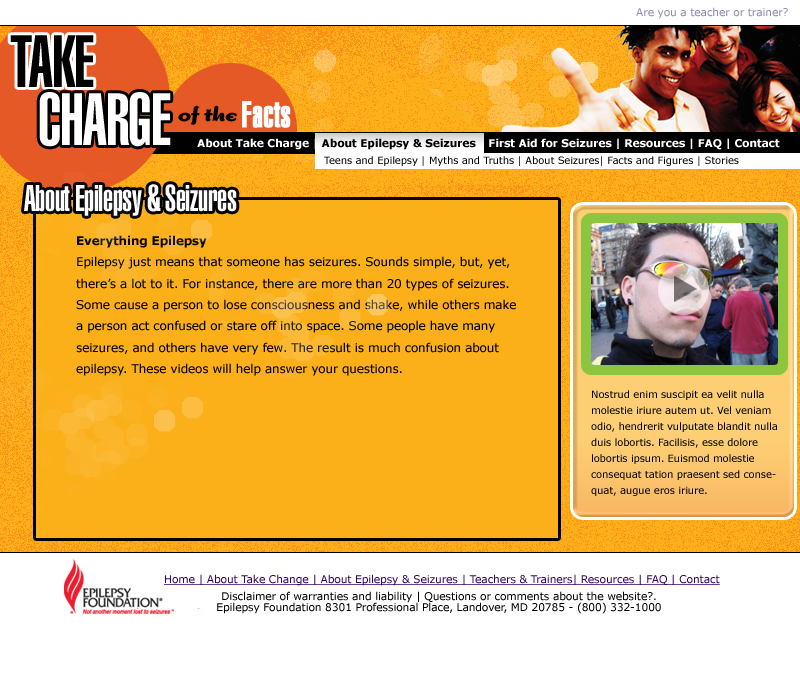
<style>
.page{position:relative;width:800px;height:697px;background:#fbaf18}
.page>*{position:absolute;margin:0}
.t1{font:10.7px "Verdana";letter-spacing:-0.01em;color:#8d89b1}
.t2{font:72px "Swiss911BT-UltraCompressed";letter-spacing:-0.01em;color:#000000}
.t3{font:72px "Swiss911BT-UltraCompressed";letter-spacing:-0.01em;color:#ffffff}
.t4{font:20px "DogmaScriptBold";letter-spacing:-0.05em;color:#030303}
.t5{font:36px "Swiss911BT-UltraCompressed";color:#ffffff;font-weight:bold}
.t6{font:10.7px "Verdana-Bold";letter-spacing:-0.01em;color:#ffffff}
.t7{font:10.7px "Verdana-Bold";letter-spacing:-0.01em;color:#000000}
.t8{font:10px "Verdana";letter-spacing:-0.01em;color:#000000}
.t9{font:36px "Swiss911BT-UltraCompressed";letter-spacing:-0.01em;color:#fefefe}
.t10{font:12px/21.3px "Verdana";letter-spacing:-0.01em;color:#000000}
.t11{font:12px/21.3px "Verdana-Bold";letter-spacing:-0.01em;color:#000000}
.t12{font:10px/16px "Verdana";letter-spacing:-0.01em;color:#000000}
.t13{font:10.7px "Verdana";letter-spacing:-0.01em;color:#330066;text-decoration:underline}
.t14{font:10.7px/10.7px "Verdana";letter-spacing:-0.01em;color:#000000}
</style>
<div class="page">
<p class="t1" style="left:636px;top:7px;width:152px;height:12px">Are you a teacher or trainer?</p>
<p class="t2" style="left:10px;top:35px;width:84px;height:52px">TAKE</p>
<p class="t3" style="left:39px;top:92px;width:132px;height:55px">CHARGE</p>
<p class="t4" style="left:178px;top:101px;width:113px;height:27px">of the <span class="t5">Facts</span></p>
<p class="t6" style="left:197px;top:138px;width:583px;height:12px">About Take Charge | About Epilepsy &amp; Seizures | First Aid for Seizures | Resources | FAQ | Contact</p>
<p class="t7" style="left:321px;top:138px;width:155px;height:12px">About Epilepsy &amp; Seizures</p>
<p class="t8" style="left:324px;top:156px;width:415px;height:10px">Teens and Epilepsy | Myths and Truths | About Seizures| Facts and Figures | Stories</p>
<p class="t9" style="left:24px;top:184px;width:213px;height:32px">About Epilepsy &amp; Seizures</p>
<p class="t10" style="left:76px;top:235px;width:440px;height:141px"><span class="t11">Everything Epilepsy<br></span>Epilepsy just means that someone has seizures. Sounds simple, but, yet, there’s a lot to it. For instance, there are more than 20 types of seizures. Some cause a person to lose consciousness and shake, while others make a person act confused or stare off into space. Some people have many seizures, and others have very few. The result is much confusion about epilepsy. These videos will help answer your questions.</p>
<p class="t12" style="left:591px;top:390px;width:186px;height:106px">Nostrud enim suscipit ea velit nulla molestie iriure autem ut. Vel veniam odio, hendrerit vulputate blandit nulla duis lobortis. Facilisis, esse dolore <br>lobortis ipsum. Euismod molestie consequat tation praesent sed consequat, augue eros iriure.</p>
<p class="t13" style="left:164px;top:574px;width:556px;height:12px">Home | About Take Change | About Epilepsy &amp; Seizures | Teachers &amp; Trainers| Resources | FAQ | Contact</p>
<p class="t14" style="left:217px;top:591px;width:444px;height:23px;text-align:center">Disclaimer of warranties and liability | Questions or comments about the website?.<br>Epilepsy Foundation 8301 Professional Place, Landover, MD 20785 - (800) 332-1000</p>
</div>
